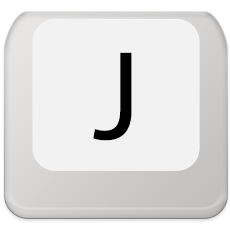
<style>
.page{position:relative;width:230px;height:230px;background:#f2f2f2}
.page>*{position:absolute;margin:0}
.t1{font:128px "MyriadPro-Regular";color:#000000}
</style>
<div class="page">
<p class="t1" style="left:93px;top:52px;width:39px;height:89px">J</p>
</div>
